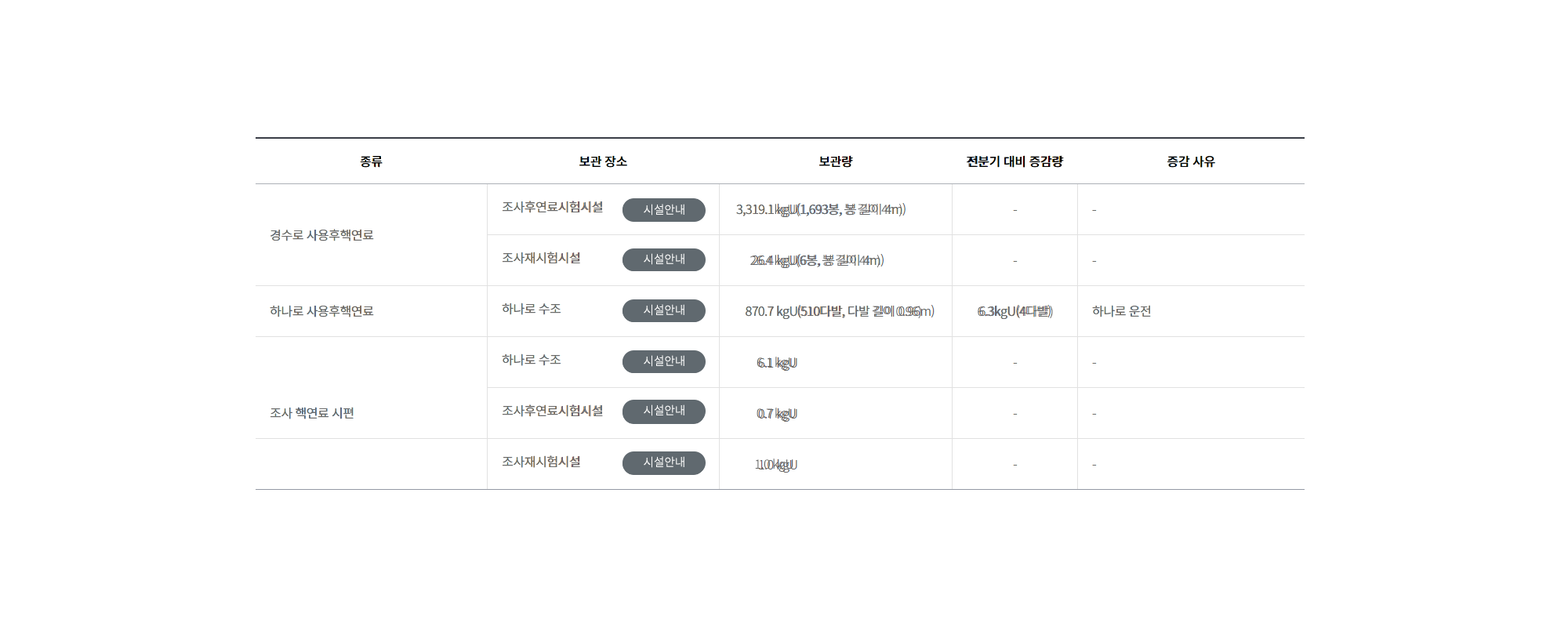
<style>
.page{position:relative;width:1568px;height:627px;background:#ffffff}
.page>*{position:absolute;margin:0}
.t1{font:12.5px "NotoSansKR-Regular";color:#000000;font-variant:small-caps}
.t2{font:12.5px/51px "NotoSansKR-Regular";letter-spacing:-0.02em;color:#6a6a6a;font-variant:small-caps}
.t3{font:11.8px "NotoSansKR-Regular";letter-spacing:-0.02em;color:#ffffff;font-variant:small-caps}
.t4{font:12.5px/51px "NotoSansKR-Regular";letter-spacing:-0.045em;color:#6a6a6a}
.t5{font:12.5px/51px "NotoSansKR-Regular";letter-spacing:-0.045em;color:#6a6a6a;font-variant:small-caps}
.t6{font:12.5px/51px "NotoSansKR-Regular";letter-spacing:-0.02em;color:#6a6a6a}
.t7{font:12.5px "NotoSansKR-Regular";letter-spacing:-0.02em;color:#6a6a6a;font-variant:small-caps}
</style>
<div class="page">
<p class="t1" style="left:361px;top:156px;width:22px;height:12px">종류</p>
<p class="t1" style="left:579px;top:156px;width:48px;height:12px">보관 장소</p>
<p class="t1" style="left:819px;top:155px;width:34px;height:13px">보관량</p>
<p class="t1" style="left:967px;top:155px;width:97px;height:13px">전분기 대비 증감량</p>
<p class="t1" style="left:1167px;top:155px;width:48px;height:13px">증감 사유</p>
<p class="t2" style="left:502px;top:201px;width:101px;height:267px;text-align:justify">조사후연료시험시설<br>조사재시험시설<br>하나로 수조<br>하나로 수조<br>조사후연료시험시설<br>조사재시험시설</p>
<p class="t3" style="left:644px;top:204px;width:40px;height:12px">시설안내</p>
<p class="t4" style="left:736px;top:203px;width:185px;height:269px;text-align:justify"><span class="t5">3,319.1</span>kgU(1,693봉, 봉 길이 4m)<br>      26.4 kgU(6봉, 봉 길이 4m)<br>    870.7 kgU(510다발, 다발 길이 0.96)<br>         6.1 kgU<br>         0.7 kgU<br>        1.0 kgU</p>
<p class="t2" style="left:978px;top:210px;width:75px;height:256px;text-align:center">-<br>-<br>6.3<span class="t6">kgU(</span>4다발)<br>-<br>-<br>-</p>
<p class="t7" style="left:1092px;top:210px;width:4px;height:1px">-</p>
<p class="t2" style="left:1092px;top:210px;width:59px;height:256px">-<br>-<br>하나로 운전<br>-<br>-<br>-</p>
<p class="t7" style="left:270px;top:229px;width:104px;height:12px">경수로 사용후핵연료</p>
<p class="t3" style="left:644px;top:253px;width:40px;height:12px">시설안내</p>
<p class="t7" style="left:270px;top:305px;width:104px;height:13px">하나로 사용후핵연료</p>
<p class="t3" style="left:644px;top:304px;width:40px;height:12px">시설안내</p>
<p class="t3" style="left:644px;top:355px;width:40px;height:12px">시설안내</p>
<p class="t7" style="left:270px;top:407px;width:83px;height:12px">조사 핵연료 시편</p>
<p class="t3" style="left:644px;top:405px;width:40px;height:11px">시설안내</p>
<p class="t3" style="left:644px;top:456px;width:40px;height:12px">시설안내</p>
</div>
